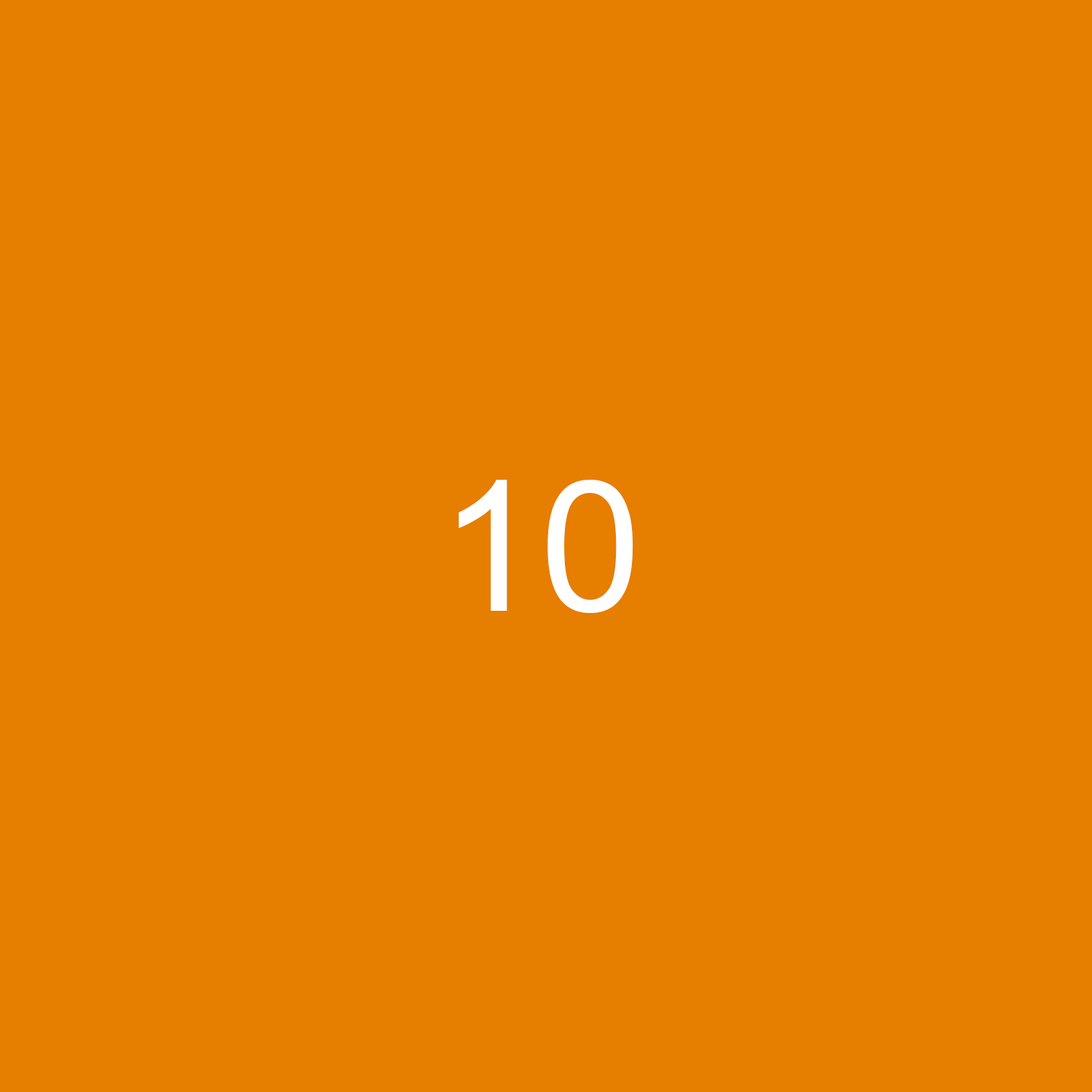
<style>
.page{position:relative;width:1092px;height:1092px;background:#e67e00}
.page>*{position:absolute;margin:0}
.t1{font:182px "ArialMT";color:#ffffff}
</style>
<div class="page">
<p class="t1" style="left:459px;top:480px;width:174px;height:133px">10</p>
</div>
